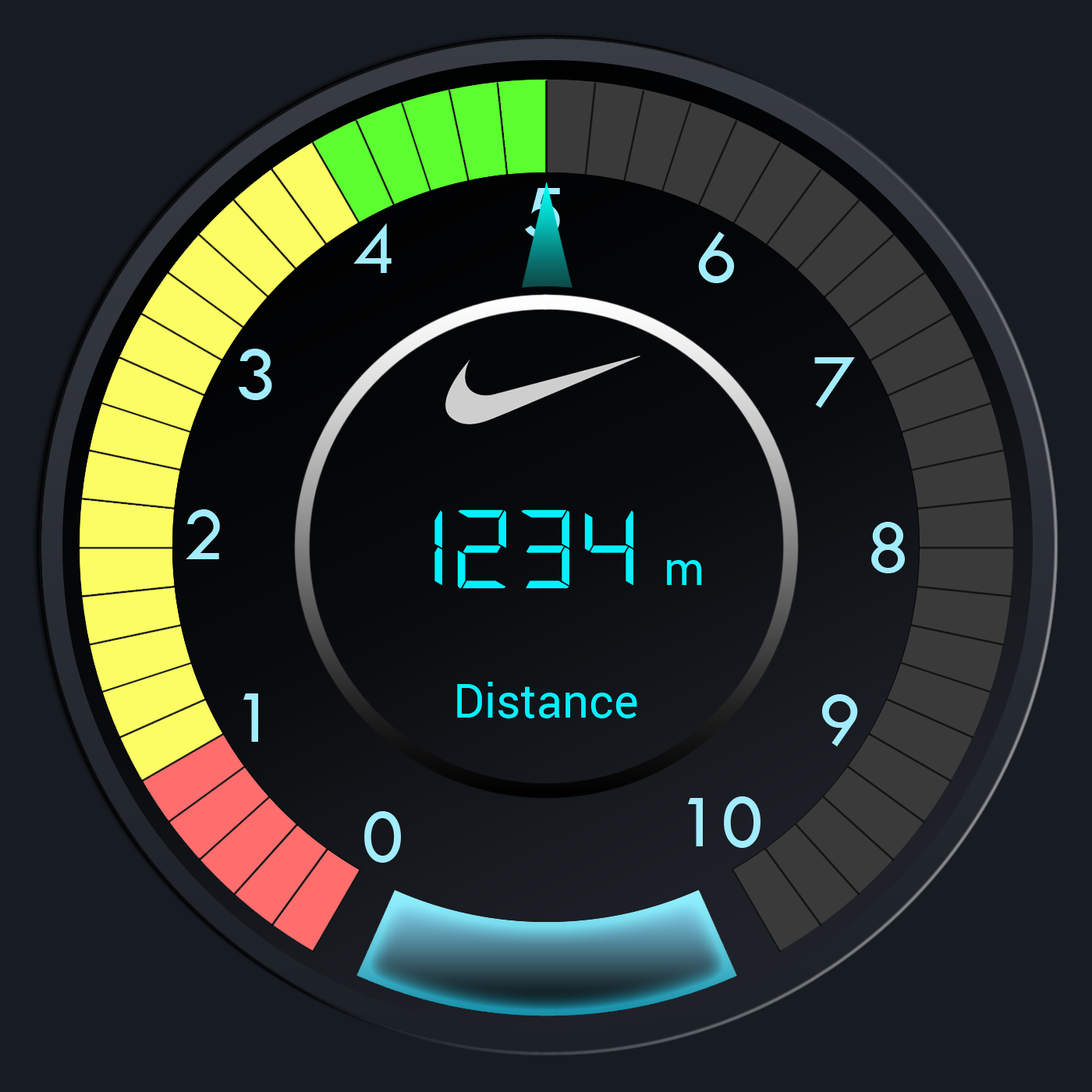
<style>
.page{position:relative;width:1092px;height:1092px;background:#171b22}
.page>*{position:absolute;margin:0}
.t1{font:78px "TwCenMT-Regular"}
.t2{font:78px "TwCenMT-Regular";color:#a2ecff}
.t3{font:78px "DSEG7Modern-Regular";color:#05f0ff}
.t4{font:46.8px "Roboto-Regular";color:#05f0ff}
</style>
<div class="page">
<p class="t1" style="left:525px;top:188px;width:35px;height:50px">5</p>
<p class="t2" style="left:353px;top:223px;width:39px;height:50px">4</p>
<p class="t2" style="left:698px;top:232px;width:37px;height:51px">6</p>
<p class="t2" style="left:239px;top:349px;width:33px;height:51px">3</p>
<p class="t2" style="left:814px;top:357px;width:41px;height:51px">7</p>
<p class="t2" style="left:186px;top:509px;width:34px;height:50px">2</p>
<p class="t3" style="left:434px;top:509px;width:199px;height:80px">1234</p>
<p class="t2" style="left:871px;top:522px;width:34px;height:51px">8</p>
<p class="t4" style="left:667px;top:560px;width:35px;height:25px">m</p>
<p class="t4" style="left:457px;top:682px;width:180px;height:36px">Distance</p>
<p class="t2" style="left:243px;top:693px;width:15px;height:49px">1</p>
<p class="t2" style="left:822px;top:694px;width:36px;height:52px">9</p>
<p class="t2" style="left:688px;top:796px;width:72px;height:52px">10</p>
<p class="t2" style="left:364px;top:811px;width:37px;height:52px">0</p>
</div>
